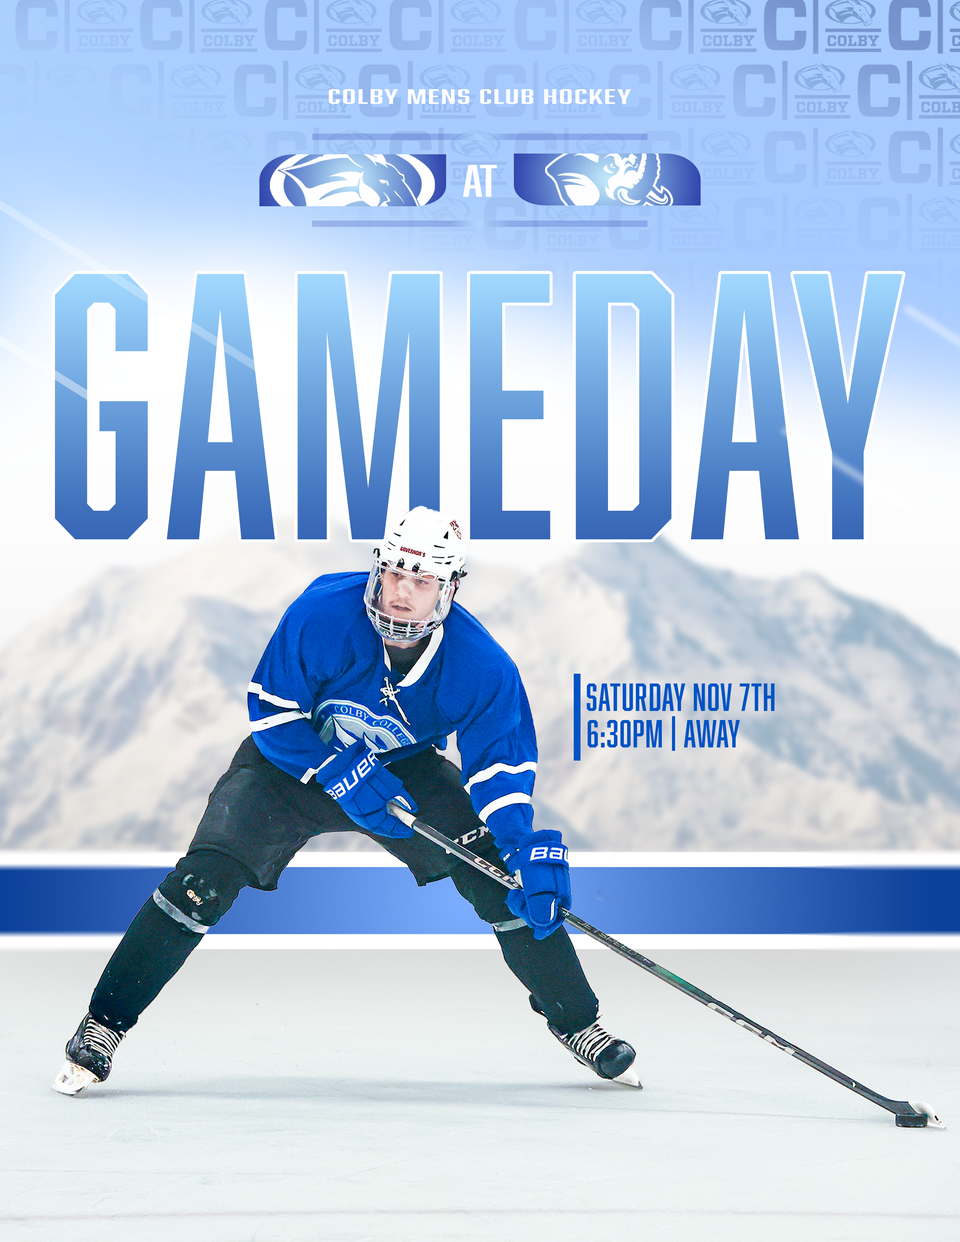
<style>
.page{position:relative;width:960px;height:1242px}
.page>*{position:absolute;margin:0}
.t1{font:19.4px "Abolition-Regular";letter-spacing:0.025em;color:#ffffff;scale:2.13 1}
.t2{font:42.3px "Abolition-Regular";color:#ffffff;scale:1.41 1}
.t3{font:349px "Abolition-Regular";letter-spacing:0.025em;scale:0.96 1}
.t4{font:36.4px "Abolition-Regular";letter-spacing:0.025em;color:#0053c5}
</style>
<div class="page">
<p class="t1" style="left:329px;top:89px;width:302px;height:15px">COLBY MENS CLUB HOCKEY</p>
<p class="t2" style="left:463px;top:165px;width:34px;height:32px">at</p>
<p class="t3" style="left:55px;top:274px;width:848px;height:265px">GAMEDAY</p>
<p class="t4" style="left:586px;top:684px;width:189px;height:27px">Saturday nov 7th</p>
<p class="t4" style="left:588px;top:716px;width:152px;height:35px">6:30pm | away</p>
</div>
